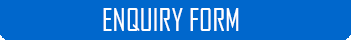
<style>
.page{position:relative;width:351px;height:40px;background:#0067cc}
.page>*{position:absolute;margin:0}
.t1{font:30px "AgencyFB-Reg";color:#ffffff}
</style>
<div class="page">
<p class="t1" style="left:103px;top:8px;width:136px;height:23px">ENQUIRY FORM</p>
</div>
